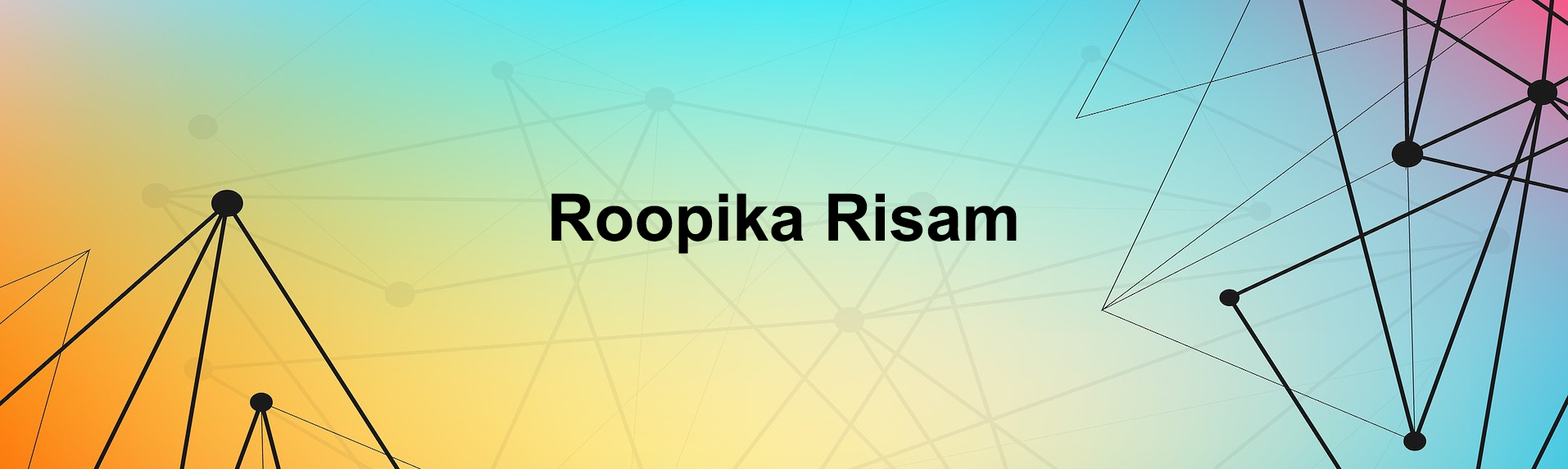
<style>
.page{position:relative;width:1568px;height:469px}
.page>*{position:absolute;margin:0}
.t1{font:65.5px "Arial-BoldMT";color:#000000}
</style>
<div class="page">
<p class="t1" style="left:551px;top:193px;width:466px;height:61px">Roopika Risam</p>
</div>
